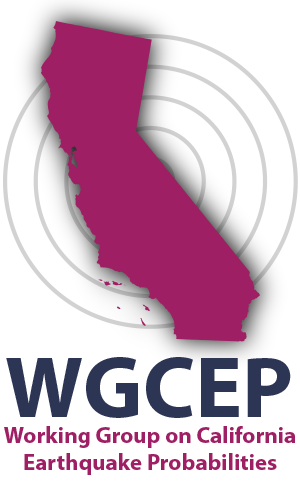
<style>
.page{position:relative;width:300px;height:485px;background:#ffffff}
.page>*{position:absolute;margin:0}
.t1{font:88px "MyriadPro-Bold";color:#2c3554}
.t2{font:23px "MyriadPro-Bold";color:#9e1f63}
</style>
<div class="page">
<p class="t1" style="left:6px;top:357px;width:285px;height:61px">WGCEP</p>
<p class="t2" style="left:4px;top:426px;width:291px;height:49px;text-align:center">Working Group on California Earthquake Probabilities</p>
</div>
